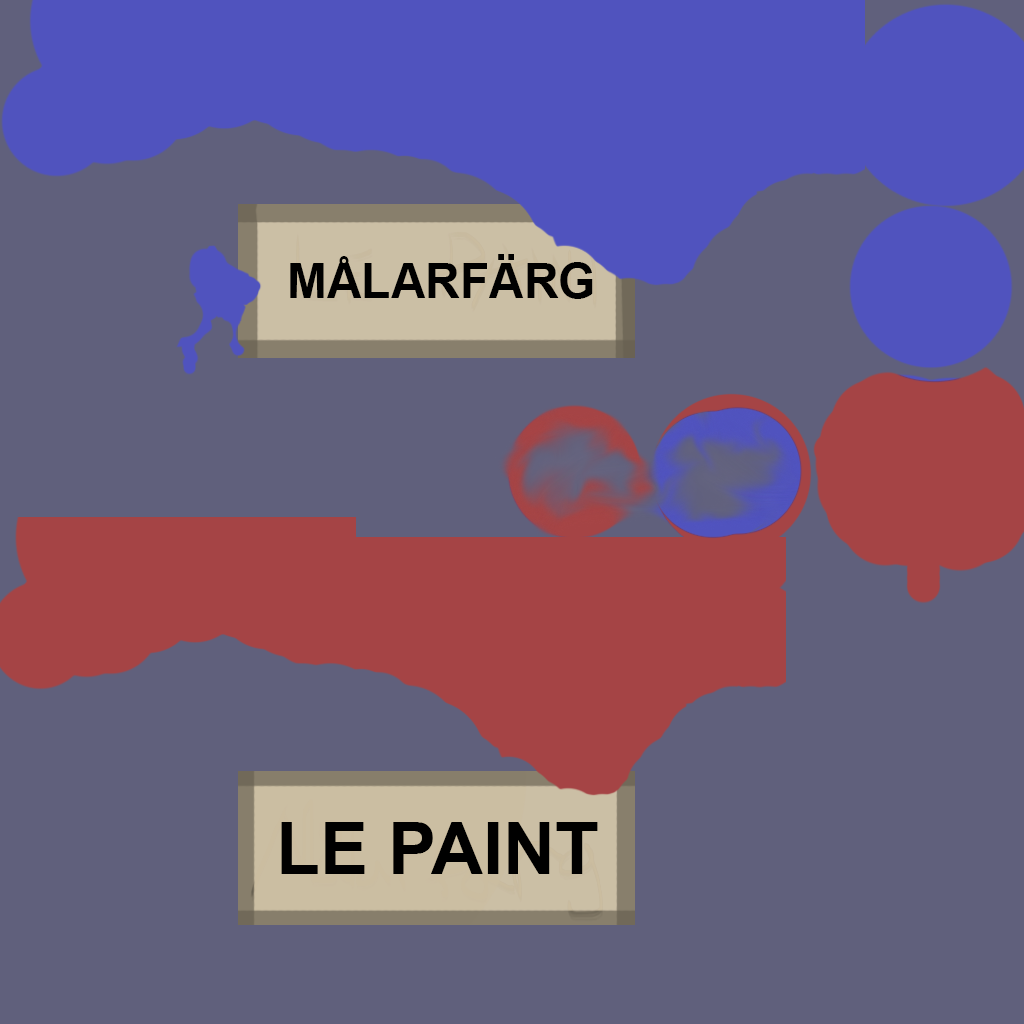
<style>
.page{position:relative;width:1024px;height:1024px;background:#60607c}
.page>*{position:absolute;margin:0}
.t1{font:48px "Arial-BoldMT";color:#000000}
.t2{font:72px "Arial-BoldMT";color:#000000}
</style>
<div class="page">
<p class="t1" style="left:290px;top:254px;width:303px;height:45px">MÅLARFÄRG</p>
<p class="t2" style="left:281px;top:822px;width:317px;height:52px">LE PAINT</p>
</div>
